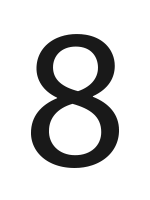
<style>
.page{position:relative;width:150px;height:200px;background:#ffffff}
.page>*{position:absolute;margin:0}
.t1{font:200px "MyriadPro-Regular";color:#191919}
</style>
<div class="page">
<p class="t1" style="left:31px;top:34px;width:88px;height:134px">8</p>
</div>
